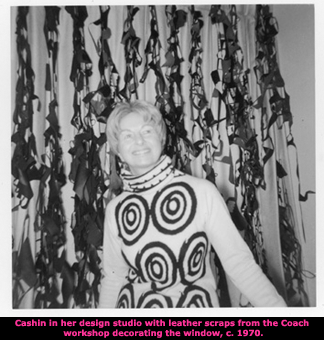
<style>
.page{position:relative;width:324px;height:340px}
.page>*{position:absolute;margin:0}
.t1{font:8.3px "Verdana-Bold";color:#ff3399}
</style>
<div class="page">
<p class="t1" style="left:15px;top:319px;width:294px;height:19px;text-align:center">Cashin in her design studio with leather scraps from the Coach<br> workshop decorating the window, c. 1970.</p>
</div>
